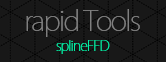
<style>
.page{position:relative;width:166px;height:62px;background:#181818}
.page>*{position:absolute;margin:0}
.t1{font:28px "KozGoPr6N-ExtraLight";letter-spacing:-0.06em;color:#7f7f7f}
.t2{font:14px "KozGoPr6N-ExtraLight";letter-spacing:-0.06em;color:#02f0a4}
</style>
<div class="page">
<p class="t1" style="left:26px;top:9px;width:114px;height:28px">rapid Tools</p>
<p class="t2" style="left:56px;top:40px;width:54px;height:14px">splineFFD</p>
</div>
